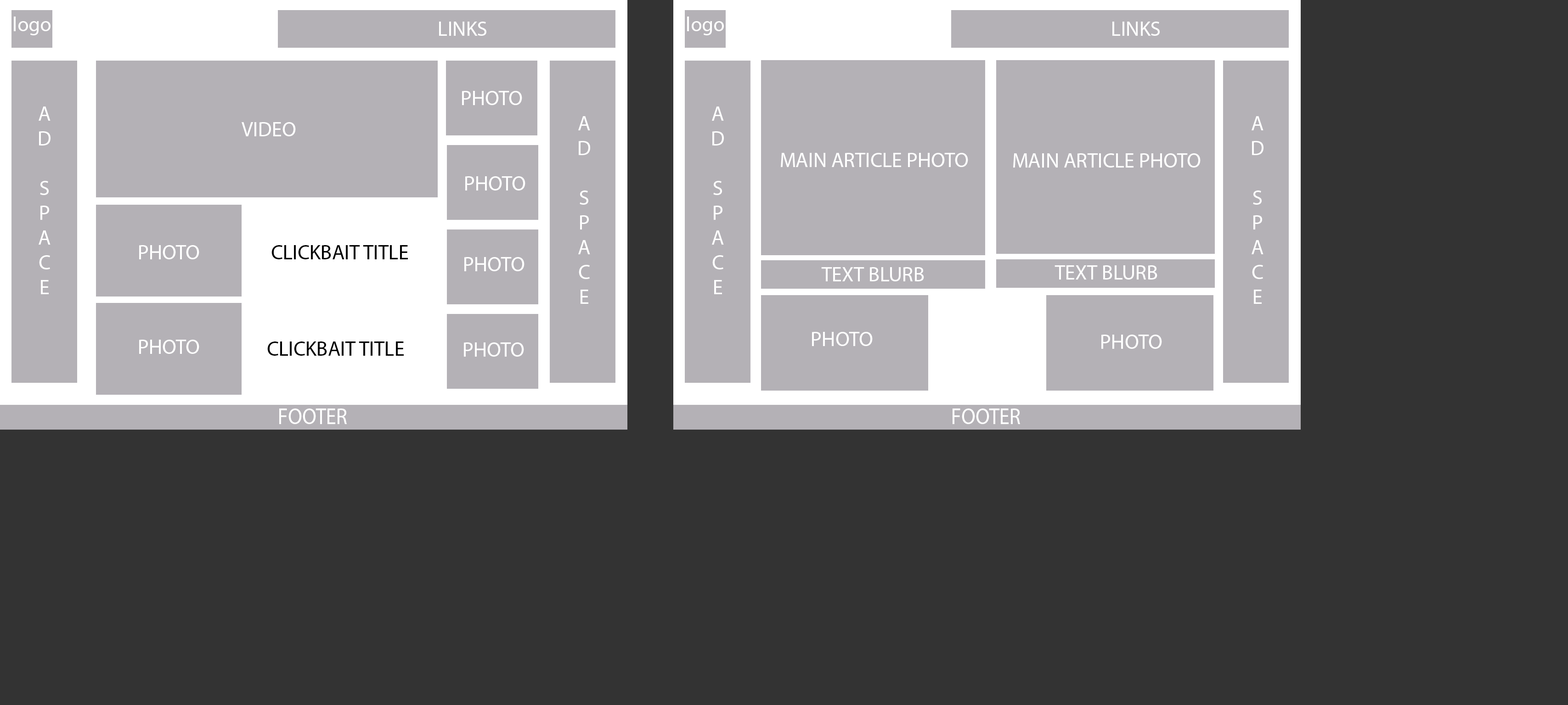
<style>
.page{position:relative;width:1568px;height:705px;background:#333333}
.page>*{position:absolute;margin:0}
.t1{font:20.7px "MyriadPro-Regular";color:#ffffff}
.t2{font:20.7px "MyriadPro-Regular";color:#000000}
.t3{font:22.9px "MyriadPro-Regular";color:#ffffff;scale:0.9 1}
</style>
<div class="page">
<p class="t1" style="left:14px;top:17px;width:37px;height:18px">logo</p>
<p class="t1" style="left:687px;top:17px;width:37px;height:18px">logo</p>
<p class="t1" style="left:439px;top:22px;width:47px;height:14px">LINKS</p>
<p class="t1" style="left:1112px;top:22px;width:48px;height:14px">LINKS</p>
<p class="t1" style="left:462px;top:91px;width:60px;height:14px">PHOTO</p>
<p class="t1" style="left:39px;top:107px;width:12px;height:187px;text-align:center">A<br>D<br><br>S<br>P<br>A<br>C<br>E</p>
<p class="t1" style="left:712px;top:107px;width:12px;height:187px;text-align:center">A<br>D<br><br>S<br>P<br>A<br>C<br>E</p>
<p class="t1" style="left:242px;top:122px;width:54px;height:14px">VIDEO</p>
<p class="t1" style="left:578px;top:116px;width:12px;height:188px;text-align:center">A<br>D<br><br>S<br>P<br>A<br>C<br>E</p>
<p class="t1" style="left:1252px;top:116px;width:11px;height:188px;text-align:center">A<br>D<br><br>S<br>P<br>A<br>C<br>E</p>
<p class="t1" style="left:781px;top:153px;width:187px;height:14px">MAIN ARTICLE PHOTO</p>
<p class="t1" style="left:1013px;top:153px;width:188px;height:15px">MAIN ARTICLE PHOTO</p>
<p class="t1" style="left:465px;top:176px;width:60px;height:15px">PHOTO</p>
<p class="t1" style="left:139px;top:245px;width:60px;height:14px">PHOTO</p>
<p class="t2" style="left:271px;top:245px;width:137px;height:14px">CLICKBAIT TITLE</p>
<p class="t1" style="left:464px;top:257px;width:61px;height:14px">PHOTO</p>
<p class="t1" style="left:821px;top:267px;width:103px;height:15px">TEXT BLURB</p>
<p class="t1" style="left:1055px;top:265px;width:102px;height:15px">TEXT BLURB</p>
<p class="t1" style="left:139px;top:340px;width:60px;height:14px">PHOTO</p>
<p class="t2" style="left:267px;top:342px;width:137px;height:14px">CLICKBAIT TITLE</p>
<p class="t1" style="left:812px;top:332px;width:61px;height:14px">PHOTO</p>
<p class="t1" style="left:1101px;top:335px;width:61px;height:14px">PHOTO</p>
<p class="t1" style="left:464px;top:343px;width:60px;height:14px">PHOTO</p>
<p class="t3" style="left:279px;top:409px;width:68px;height:15px">FOOTER</p>
<p class="t3" style="left:953px;top:409px;width:67px;height:15px">FOOTER</p>
</div>
